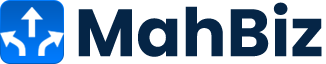
<style>
.page{position:relative;width:326px;height:64px;background:#ffffff}
.page>*{position:absolute;margin:0}
.t1{font:67px "Poppins-Bold";color:#052546}
</style>
<div class="page">
<p class="t1" style="left:78px;top:2px;width:244px;height:55px">MahBiz</p>
</div>
